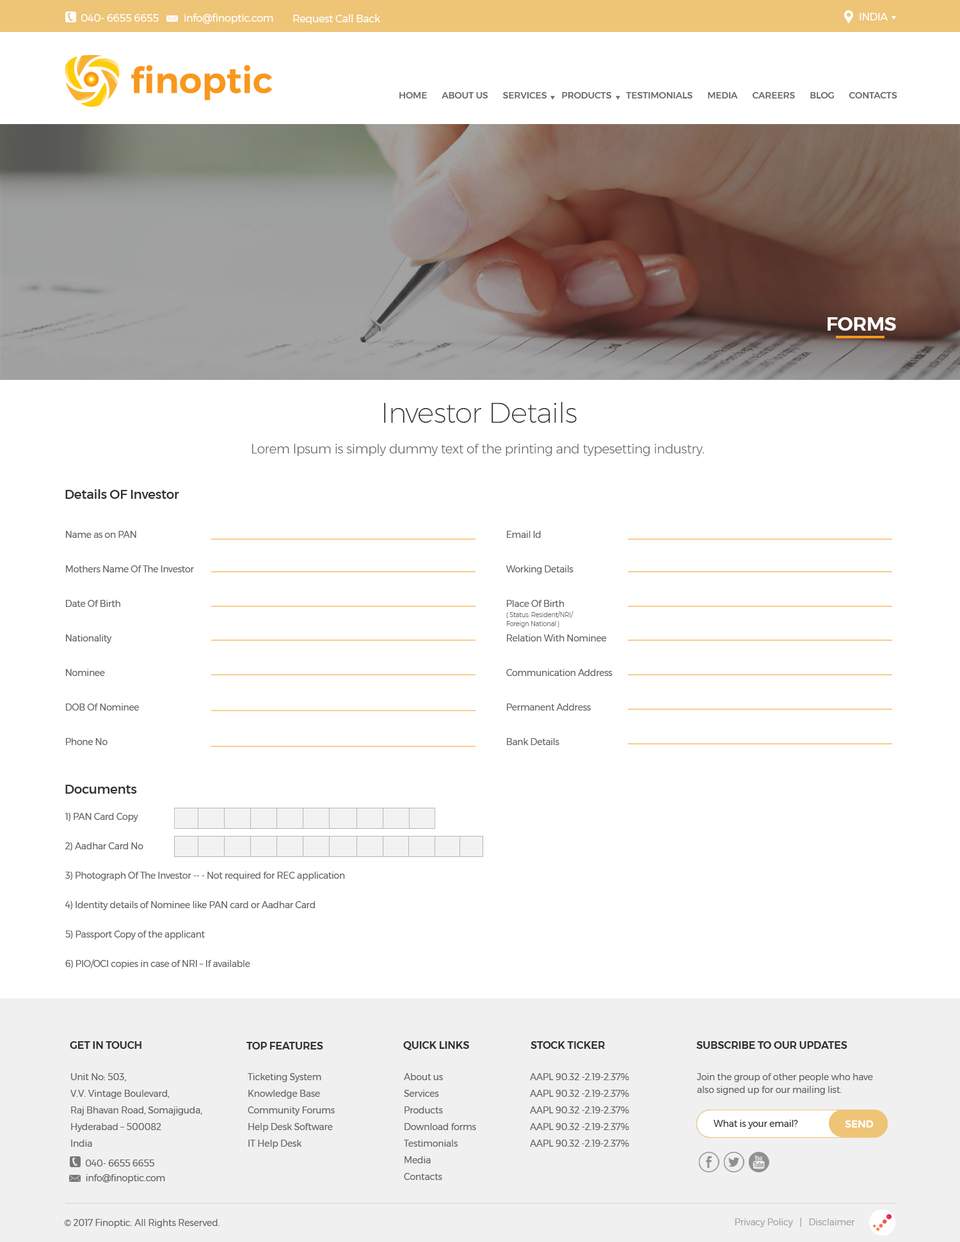
<style>
.page{position:relative;width:960px;height:1242px;background:#ffffff}
.page>*{position:absolute;margin:0}
.t1{font:10.2px "Montserrat-Regular";letter-spacing:-0.02em;color:#ffffff}
.t2{font:9px "Montserrat-Medium";letter-spacing:-0.01em;color:#666666}
.t3{font:19.2px "Montserrat-SemiBold";letter-spacing:-0.01em;color:#ffffff;text-transform:uppercase}
.t4{font:28.3px "Montserrat-ExtraLight";letter-spacing:-0.02em;color:#333333}
.t5{font:12.9px "Montserrat-Light";letter-spacing:-0.02em;color:#666666}
.t6{font:12.8px "Montserrat-Medium";letter-spacing:-0.02em;color:#333333}
.t7{font:9px/34.5px "Montserrat-Regular";letter-spacing:-0.02em;color:#666666}
.t8{font:6.4px/9px "Montserrat-Light";letter-spacing:-0.02em;color:#666666}
.t9{font:9px/29.4px "Montserrat-Regular";letter-spacing:-0.02em;color:#666666}
.t10{font:10.2px "Montserrat-SemiBold";letter-spacing:-0.01em;color:#333333}
.t11{font:9px/16.6px "Montserrat-Regular";letter-spacing:-0.01em;color:#666666}
.t12{font:9px/12.8px "Montserrat-Regular";letter-spacing:-0.01em;color:#666666}
.t13{font:9px "Montserrat-Regular";letter-spacing:-0.01em;color:#333333}
.t14{font:10.2px "Montserrat-Bold";letter-spacing:-0.02em;color:#ffffff}
.t15{font:9px "Montserrat-Regular";letter-spacing:-0.02em;color:#666666}
.t16{font:9.1px "Montserrat-Regular";letter-spacing:-0.01em;color:#696969}
.t17{font:9px "Montserrat-Regular";letter-spacing:-0.01em;color:#a6a6a6}
</style>
<div class="page">
<p class="t1" style="left:81px;top:14px;width:78px;height:8px">040- 6655 6655</p>
<p class="t1" style="left:184px;top:13px;width:89px;height:11px">info@finoptic.com</p>
<p class="t1" style="left:293px;top:14px;width:88px;height:10px">Request Call Back</p>
<p class="t1" style="left:859px;top:13px;width:29px;height:7px">INDIA</p>
<p class="t2" style="left:399px;top:92px;width:498px;height:7px">HOME       ABOUT US       SERVICES       PRODUCTS       TESTIMONIALS       MEDIA       CAREERS       BLOG       CONTACTS</p>
<p class="t3" style="left:827px;top:317px;width:69px;height:14px">Forms</p>
<p class="t4" style="left:384px;top:402px;width:192px;height:21px">Investor Details</p>
<p class="t5" style="left:251px;top:444px;width:453px;height:12px">Lorem Ipsum is simply dummy text of the printing and typesetting industry.</p>
<p class="t6" style="left:65px;top:489px;width:114px;height:10px">Details OF Investor</p>
<p class="t7" style="left:66px;top:531px;width:128px;height:214px">Name as on PAN<br>Mothers Name Of The Investor<br>Date Of Birth<br>Nationality<br>Nominee<br>DOB Of Nominee<br>Phone No</p>
<p class="t7" style="left:505px;top:531px;width:107px;height:214px">Email Id<br>Working Details<br>Place Of Birth<br>Relation With Nominee<br>Communication Address<br>Permanent Address<br>Bank Details</p>
<p class="t8" style="left:506px;top:611px;width:67px;height:17px">( Status: Resident/NRI/<br>Foreign National )</p>
<p class="t6" style="left:65px;top:785px;width:72px;height:9px">Documents</p>
<p class="t9" style="left:65px;top:813px;width:280px;height:156px">1) PAN Card Copy<br>2) Aadhar Card No<br>3) Photograph Of The Investor -- - Not required for REC application<br>4) Identity details of Nominee like PAN card or Aadhar Card<br>5) Passport Copy of the applicant<br>6) PIO/OCI copies in case of NRI – If available</p>
<p class="t10" style="left:70px;top:1042px;width:71px;height:7px">GET IN TOUCH</p>
<p class="t10" style="left:246px;top:1042px;width:77px;height:8px">TOP FEATURES</p>
<p class="t10" style="left:403px;top:1042px;width:66px;height:9px">QUICK LINKS</p>
<p class="t10" style="left:530px;top:1042px;width:75px;height:7px">STOCK TICKER</p>
<p class="t10" style="left:696px;top:1042px;width:151px;height:7px">SUBSCRIBE TO OUR UPDATES</p>
<p class="t11" style="left:70px;top:1074px;width:132px;height:73px">Unit No: 503,<br>V.V. Vintage Boulevard,<br>Raj Bhavan Road, Somajiguda, <br>Hyderabad – 500082 <br>India</p>
<p class="t11" style="left:248px;top:1074px;width:87px;height:75px">Ticketing System<br>Knowledge Base<br>Community Forums<br>Help Desk Software<br>IT Help Desk</p>
<p class="t11" style="left:403px;top:1074px;width:73px;height:106px">About us<br>Services<br>Products<br>Download forms<br>Testimonials<br>Media<br>Contacts</p>
<p class="t11" style="left:529px;top:1074px;width:100px;height:73px">AAPL 90.32 -2.19-2.37%<br>AAPL 90.32 -2.19-2.37%<br>AAPL 90.32 -2.19-2.37%<br>AAPL 90.32 -2.19-2.37%<br>AAPL 90.32 -2.19-2.37%</p>
<p class="t12" style="left:696px;top:1074px;width:177px;height:21px">Join the group of other people who have<br>also signed up for our mailing list.</p>
<p class="t13" style="left:713px;top:1120px;width:85px;height:9px">What is your email?</p>
<p class="t14" style="left:845px;top:1120px;width:28px;height:9px">SEND</p>
<p class="t15" style="left:85px;top:1160px;width:69px;height:7px">040- 6655 6655</p>
<p class="t15" style="left:86px;top:1175px;width:79px;height:9px">info@finoptic.com</p>
<p class="t16" style="left:64px;top:1219px;width:155px;height:9px">© 2017 Finoptic. All Rights Reserved.</p>
<p class="t17" style="left:734px;top:1218px;width:121px;height:10px">Privacy Policy   |   Disclaimer</p>
</div>
